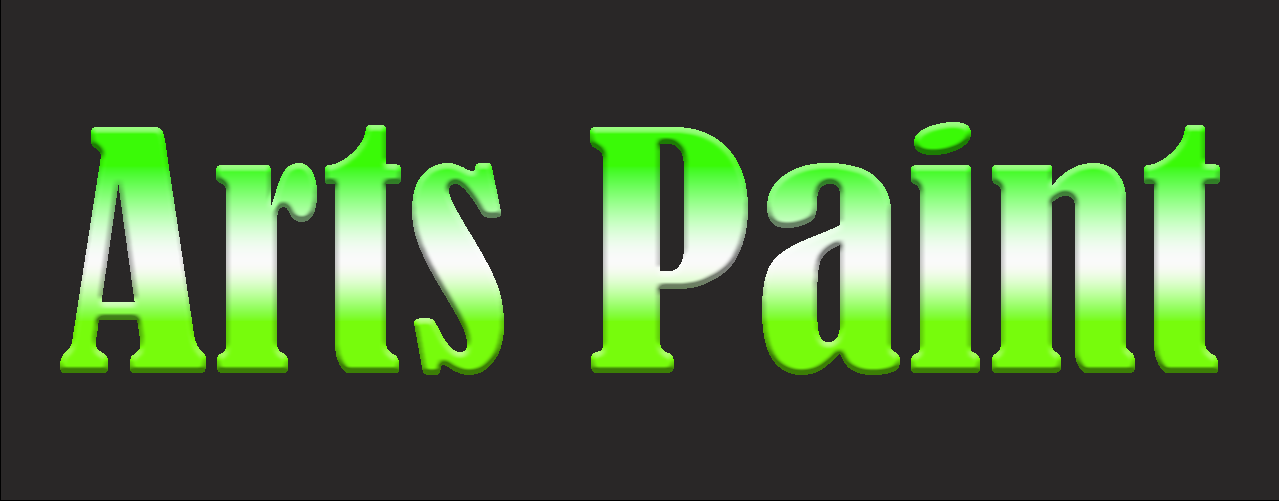
<style>
.page{position:relative;width:1279px;height:504px;background:#292727}
.page>*{position:absolute;margin:0}
.t1{font:312.5px "BernardMT-Condensed"}
</style>
<div class="page">
<p class="t1" style="left:60px;top:122px;width:1160px;height:253px">Arts Paint</p>
</div>
